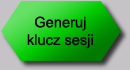
<style>
.page{position:relative;width:130px;height:70px}
.page>*{position:absolute;margin:0}
.t1{font:14.7px "ArialMT";color:#000000}
</style>
<div class="page">
<p class="t1" style="left:27px;top:16px;width:66px;height:33px;text-align:center">Generuj<br>klucz sesji</p>
</div>
